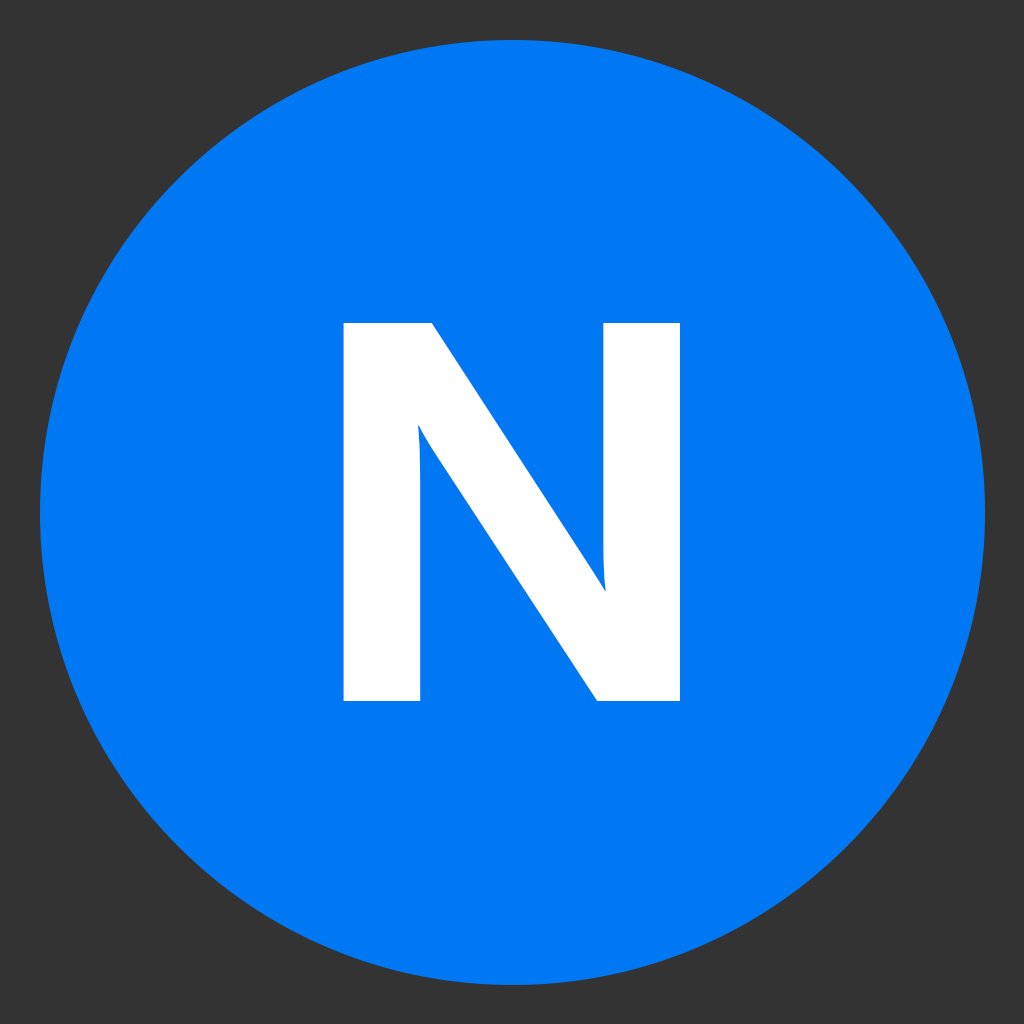
<style>
.page{position:relative;width:1024px;height:1024px;background:#0078f3}
.page>*{position:absolute;margin:0}
.t1{font:500px "MicrosoftYaHeiUI-Bold";color:#ffffff}
</style>
<div class="page">
<p class="t1" style="left:343px;top:323px;width:337px;height:378px">N</p>
</div>
